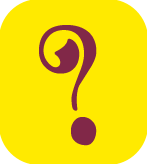
<style>
.page{position:relative;width:147px;height:164px;background:#ffea00}
.page>*{position:absolute;margin:0}
.t1{font:174.7px "Alfredo";letter-spacing:0.025em;color:#812848;font-weight:bold}
</style>
<div class="page">
<p class="t1" style="left:39px;top:25px;width:58px;height:121px">?</p>
</div>
